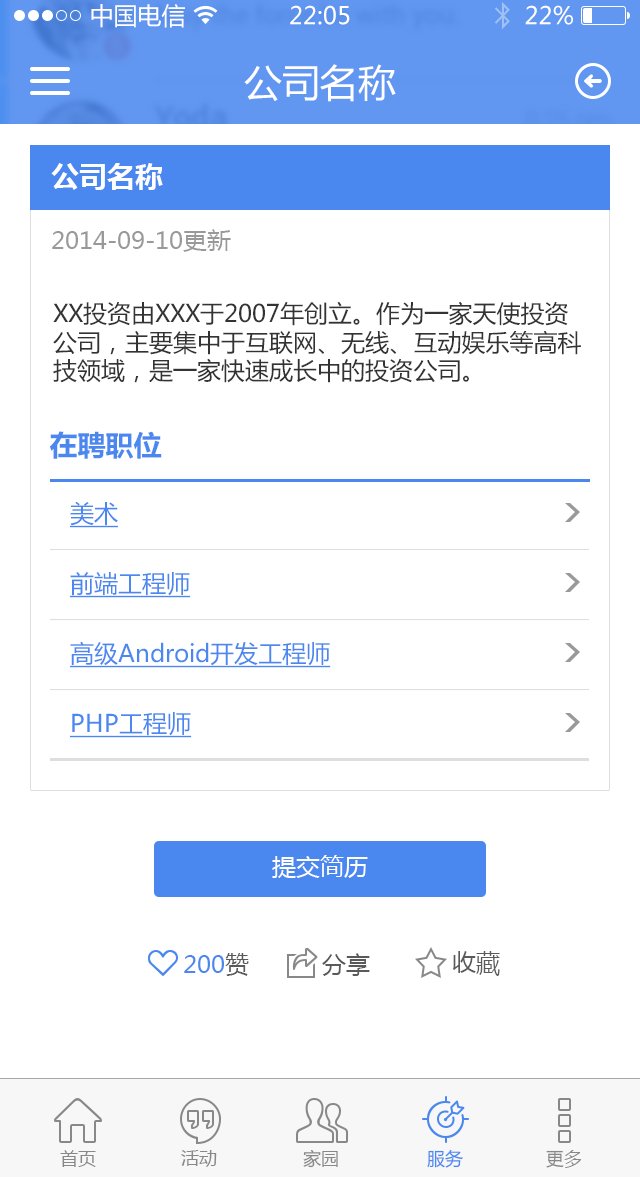
<style>
.page{position:relative;width:640px;height:1177px;background:#ffffff}
.page>*{position:absolute;margin:0}
.t1{font:24px "MicrosoftYaHei";color:#ffffff}
.t2{font:38px "MicrosoftYaHei";color:#ffffff}
.t3{font:28px "MicrosoftYaHei-Bold";color:#fefefe}
.t4{font:24px "MicrosoftYaHei";color:#999999}
.t5{font:24px "MicrosoftYaHei";color:#333333}
.t6{font:28px "MicrosoftYaHei-Bold";color:#4a87ee}
.t7{font:24px/70px "MicrosoftYaHei";color:#4a87ee;text-decoration:underline}
.t8{font:24px "MicrosoftYaHei";color:#4a87ee}
.t9{font:24px "MicrosoftYaHei";color:#5a5a5a}
.t10{font:18px "MicrosoftYaHei";color:#888888}
.t11{font:18px "MicrosoftYaHei";color:#4a87ee}
</style>
<div class="page">
<p class="t1" style="left:91px;top:4px;width:94px;height:24px">中国电信</p>
<p class="t1" style="left:290px;top:5px;width:60px;height:20px">22:05</p>
<p class="t1" style="left:525px;top:5px;width:48px;height:20px">22%</p>
<p class="t2" style="left:244px;top:64px;width:152px;height:38px">公司名称</p>
<p class="t3" style="left:51px;top:163px;width:112px;height:27px">公司名称</p>
<p class="t4" style="left:52px;top:229px;width:179px;height:23px">2014-09-10更新</p>
<p class="t5" style="left:53px;top:301px;width:528px;height:82px">XX投资由XXX于2007年创立。作为一家天使投资公司，主要集中于互联网、无线、互动娱乐等高科技领域，是一家快速成长中的投资公司。</p>
<p class="t6" style="left:50px;top:431px;width:112px;height:28px">在聘职位</p>
<p class="t7" style="left:69px;top:501px;width:262px;height:237px">美术<br>前端工程师<br>高级Android开发工程师<br>PHP工程师</p>
<p class="t1" style="left:272px;top:855px;width:96px;height:23px">提交简历</p>
<p class="t8" style="left:184px;top:953px;width:65px;height:23px">200<span class="t9">赞</span></p>
<p class="t9" style="left:322px;top:953px;width:48px;height:23px">分享</p>
<p class="t9" style="left:453px;top:951px;width:47px;height:25px">收藏</p>
<p class="t10" style="left:60px;top:1150px;width:36px;height:17px">首页</p>
<p class="t10" style="left:181px;top:1150px;width:36px;height:17px">活动</p>
<p class="t10" style="left:303px;top:1149px;width:35px;height:19px">家园</p>
<p class="t11" style="left:427px;top:1149px;width:36px;height:19px">服务</p>
<p class="t10" style="left:546px;top:1150px;width:35px;height:18px">更多</p>
</div>
